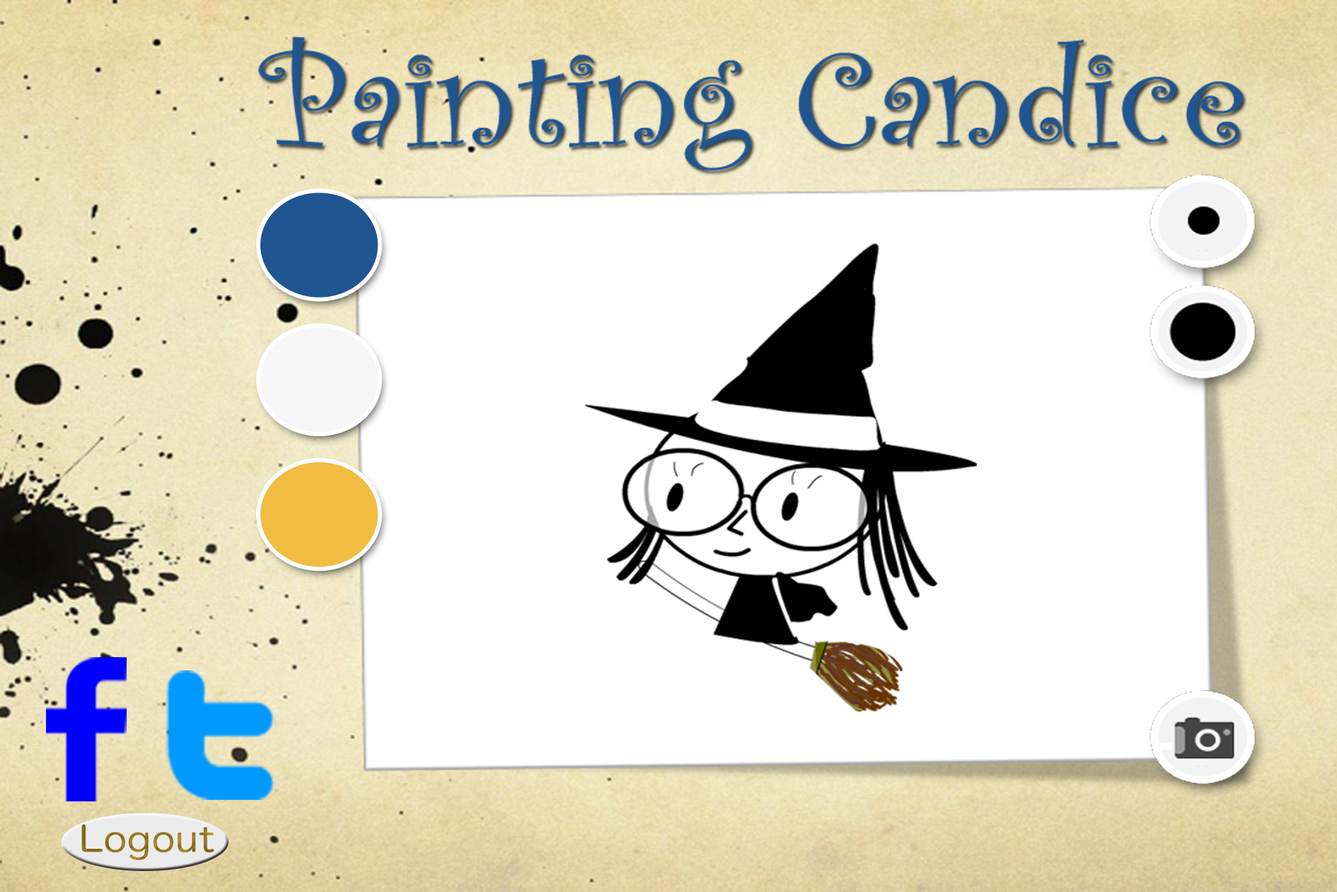
<style>
.page{position:relative;width:1337px;height:892px;background:#ffffff}
.page>*{position:absolute;margin:0}
.t1{font:139.3px "CurlzMT";color:#1f5591;scale:1.12 1}
.t2{font:35px "HiraMaruProN-W4";color:#94761e;scale:1.12 1}
</style>
<div class="page">
<p class="t1" style="left:258px;top:36px;width:985px;height:135px">Painting Candice</p>
<p class="t2" style="left:81px;top:824px;width:134px;height:36px">Logout</p>
</div>
